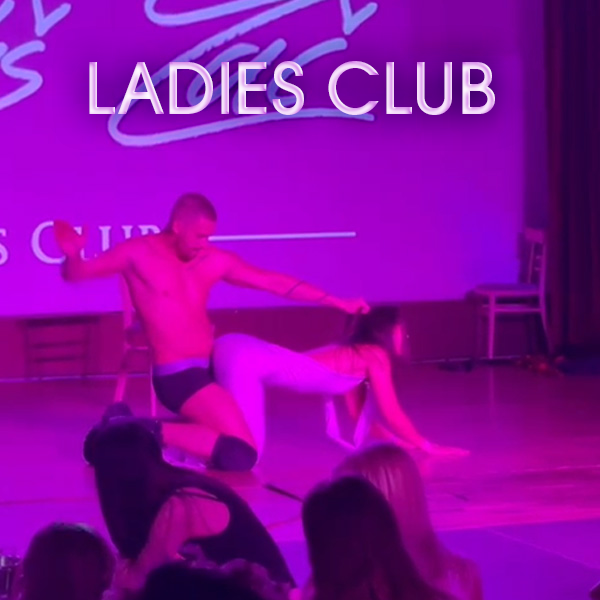
<style>
.page{position:relative;width:600px;height:600px}
.page>*{position:absolute;margin:0}
.t1{font:70px "ITCAvantGardePro-Md";text-transform:uppercase}
</style>
<div class="page">
<p class="t1" style="left:89px;top:61px;width:406px;height:54px">Ladies club</p>
</div>
